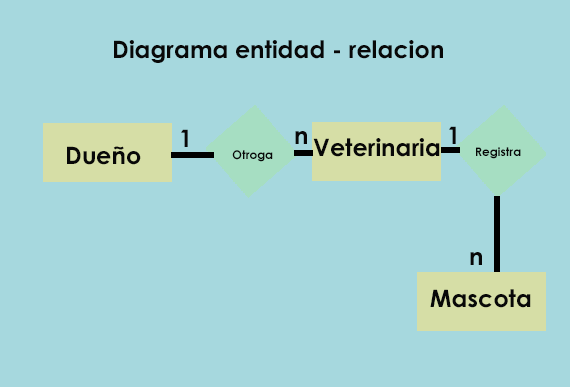
<style>
.page{position:relative;width:570px;height:387px;background:#a6d8de}
.page>*{position:absolute;margin:0}
.t1{font:24px "CenturyGothic-Bold";color:#080808}
.t2{font:12px "CenturyGothic-Bold";color:#080808}
</style>
<div class="page">
<p class="t1" style="left:114px;top:40px;width:329px;height:23px">Diagrama entidad - relacion</p>
<p class="t1" style="left:449px;top:126px;width:7px;height:18px">1</p>
<p class="t1" style="left:181px;top:129px;width:7px;height:18px">1</p>
<p class="t1" style="left:295px;top:131px;width:12px;height:13px">n</p>
<p class="t1" style="left:67px;top:146px;width:74px;height:19px">Dueño</p>
<p class="t2" style="left:232px;top:150px;width:41px;height:12px">Otroga</p>
<p class="t1" style="left:313px;top:138px;width:127px;height:19px">Veterinaria</p>
<p class="t2" style="left:476px;top:147px;width:45px;height:12px">Registra</p>
<p class="t1" style="left:470px;top:252px;width:12px;height:13px">n</p>
<p class="t1" style="left:430px;top:289px;width:101px;height:19px">Mascota</p>
</div>
